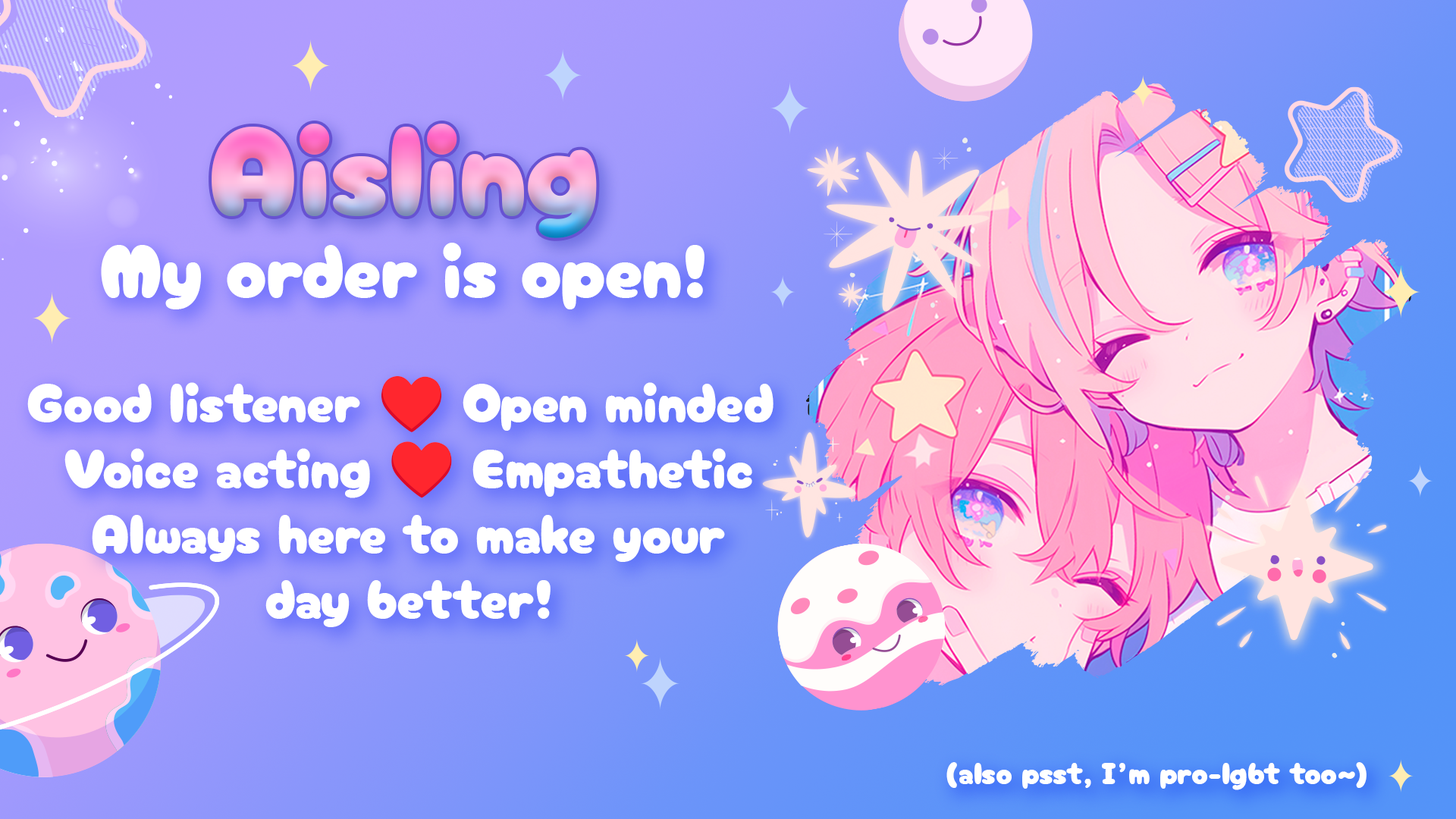
<style>
.page{position:relative;width:1456px;height:819px}
.page>*{position:absolute;margin:0}
.t1{font:126.5px "CherryBombOne-Regular"}
.t2{font:75.8px "CherryBombOne-Regular";color:#ffffff}
.t3{font:54.6px "CherryBombOne-Regular";color:#ffffff}
.t4{font:54.6px "NotoColorEmoji-SVG";color:#ffffff}
.t5{font:30.4px "CherryBombOne-Regular";color:#ffffff}
</style>
<div class="page">
<p class="t1" style="left:212px;top:124px;width:385px;height:114px">Aisling</p>
<p class="t2" style="left:101px;top:243px;width:603px;height:66px">My order is open!</p>
<p class="t3" style="left:27px;top:376px;width:746px;height:251px;text-align:center">Good listener <span class="t4">♥️</span> Open minded <br>Voice acting <span class="t4">♥️</span> Empathetic<br>Always here to make your<br>day better!</p>
<p class="t5" style="left:946px;top:762px;width:420px;height:28px">(also psst, I’m pro-lgbt too~)</p>
</div>
